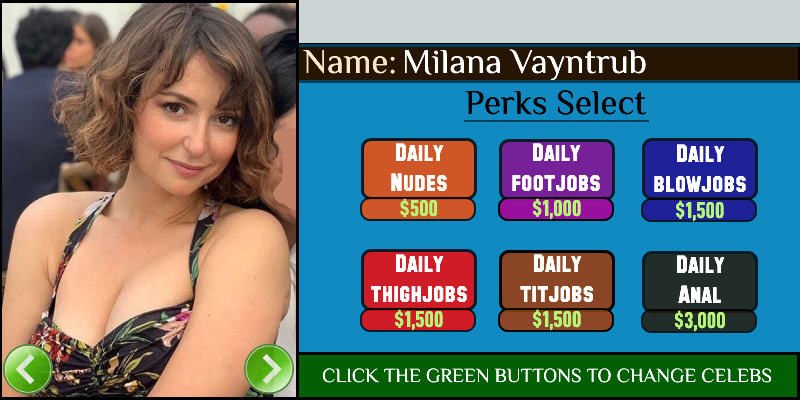
<style>
.page{position:relative;width:800px;height:400px;background:#118ac2}
.page>*{position:absolute;margin:0}
.t1{font:35px "ZCOOLXiaoWei-Regular";color:#ffe6ca}
.t2{font:35px "ZCOOLXiaoWei-Regular";color:#ffffff}
.t3{font:35px "ZCOOLXiaoWei-Regular";color:#000000}
.t4{font:25px "SFCollegiateSolid";color:#ffffff}
.t5{font:23px "D-DINCondensed-Bold";color:#b5f678}
.t6{font:20px "ZCOOLXiaoWei-Regular";color:#ffffff}
</style>
<div class="page">
<p class="t1" style="left:303px;top:49px;width:92px;height:25px">Name:</p>
<p class="t2" style="left:405px;top:49px;width:241px;height:31px">Milana Vayntrub</p>
<p class="t3" style="left:465px;top:90px;width:182px;height:25px">Perks Select</p>
<p class="t4" style="left:391px;top:143px;width:56px;height:48px;text-align:center">Daily<br>Nudes</p>
<p class="t4" style="left:512px;top:143px;width:88px;height:48px;text-align:center">Daily<br>footjobs</p>
<p class="t4" style="left:654px;top:144px;width:92px;height:48px;text-align:center">Daily<br>blowjobs</p>
<p class="t5" style="left:400px;top:198px;width:38px;height:20px">$500</p>
<p class="t5" style="left:533px;top:198px;width:48px;height:22px">$1,500</p>
<p class="t5" style="left:533px;top:198px;width:48px;height:22px">$1,000</p>
<p class="t5" style="left:676px;top:200px;width:48px;height:22px">$1,500</p>
<p class="t4" style="left:370px;top:254px;width:97px;height:48px;text-align:center">Daily<br>thighjobs</p>
<p class="t4" style="left:520px;top:254px;width:73px;height:48px;text-align:center">Daily<br>titjobs</p>
<p class="t4" style="left:520px;top:254px;width:73px;height:48px;text-align:center">Daily<br>titjobs</p>
<p class="t4" style="left:676px;top:255px;width:49px;height:48px;text-align:center">Daily<br>Anal</p>
<p class="t5" style="left:395px;top:309px;width:48px;height:22px">$1,500</p>
<p class="t5" style="left:533px;top:309px;width:48px;height:22px">$1,500</p>
<p class="t5" style="left:533px;top:309px;width:48px;height:22px">$1,500</p>
<p class="t5" style="left:674px;top:310px;width:51px;height:22px">$3,000</p>
<p class="t6" style="left:322px;top:368px;width:450px;height:15px">CLICK THE GREEN BUTTONS TO CHANGE CELEBS</p>
</div>
